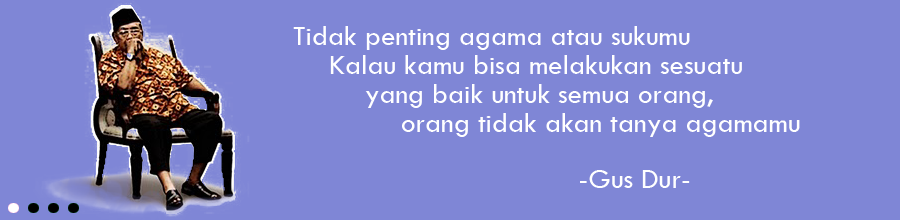
<style>
.page{position:relative;width:900px;height:220px;background:#7f86d6}
.page>*{position:absolute;margin:0}
.t1{font:29px/29px "TwCenMT-Regular";color:#ffffff}
.t2{font:29px "TwCenMT-Regular";color:#ffffff}
</style>
<div class="page">
<p class="t1" style="left:293px;top:26px;width:507px;height:111px">Tidak penting agama atau sukumu<br> Kalau kamu bisa melakukan sesuatu <br>  yang baik untuk semua orang, <br>   orang tidak akan tanya agamamu</p>
<p class="t2" style="left:580px;top:170px;width:110px;height:18px">-Gus Dur-</p>
</div>
